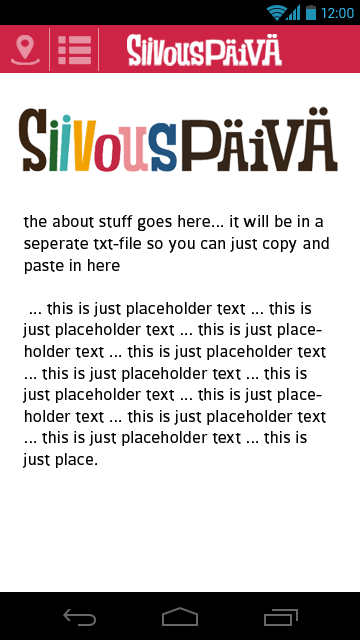
<style>
.page{position:relative;width:360px;height:640px;background:#ffffff}
.page>*{position:absolute;margin:0}
.t1{font:14px "Roboto-Regular";color:#33b5e5}
.t2{font:18px "Colaborate-Regular";color:#000000}
</style>
<div class="page">
<p class="t1" style="left:321px;top:8px;width:33px;height:10px">12:00</p>
<p class="t2" style="left:22px;top:215px;width:307px;height:253px">the about stuff goes here... it will be in a seperate txt-file so you can just copy and paste in here<br><br> ... this is just placeholder text ... this is just placeholder text ... this is just placeholder text ... this is just placeholder text ... this is just placeholder text ... this is just placeholder text ... this is just placeholder text ... this is just placeholder text ... this is just placeholder text ... this is just place.</p>
</div>
